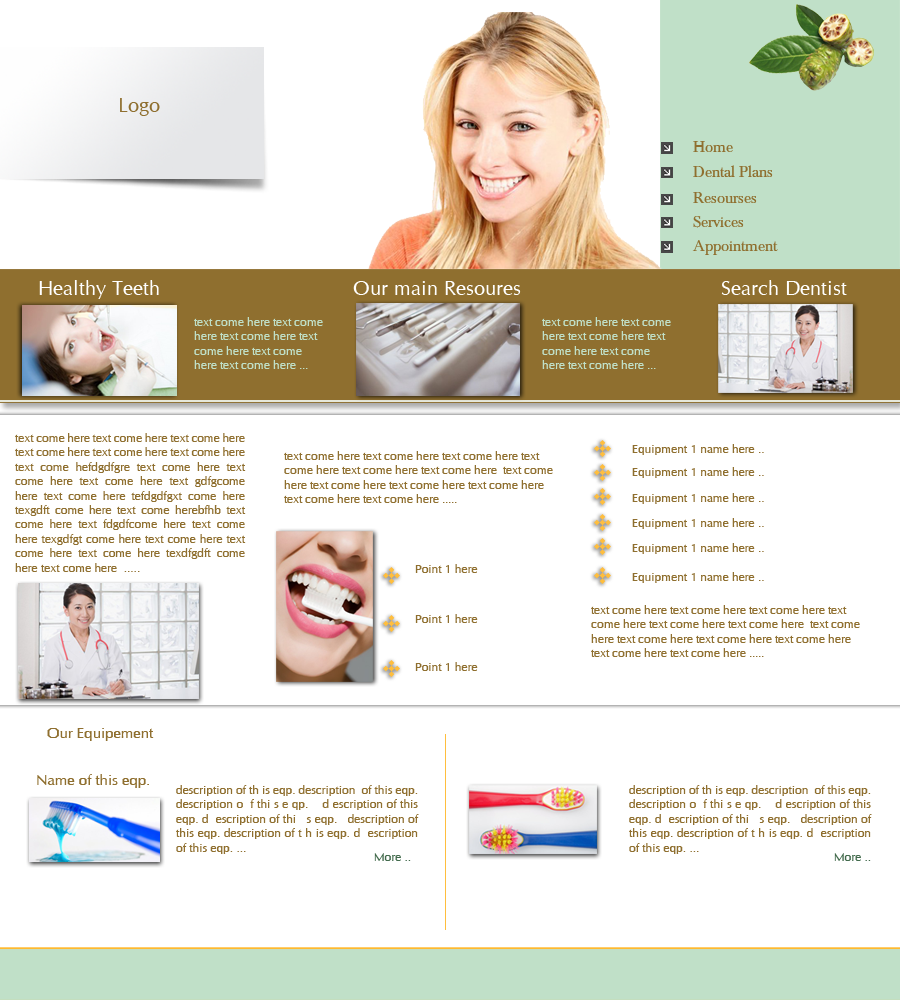
<style>
.page{position:relative;width:900px;height:1000px;background:#ffffff}
.page>*{position:absolute;margin:0}
.t1{font:20px "CGOmega";color:#8f6f2f}
.t2{font:16px "Baskerville";color:#8f6f2f}
.t3{font:20px "CGOmega";color:#ffffff}
.t4{font:12px "CGOmega";color:#c0e0c8}
.t5{font:12px "CGOmega";color:#8f6f2f}
.t6{font:15px "CGOmega";color:#8f6f2f}
.t7{font:12px "CGOmega";color:#436b4d}
</style>
<div class="page">
<p class="t1" style="left:120px;top:98px;width:40px;height:18px">Logo</p>
<p class="t2" style="left:693px;top:141px;width:40px;height:11px">Home</p>
<p class="t2" style="left:693px;top:165px;width:80px;height:12px">Dental Plans</p>
<p class="t2" style="left:693px;top:192px;width:64px;height:11px">Resourses</p>
<p class="t2" style="left:693px;top:216px;width:51px;height:12px">Services</p>
<p class="t2" style="left:692px;top:240px;width:86px;height:15px">Appointment</p>
<p class="t3" style="left:39px;top:280px;width:120px;height:19px">Healthy Teeth</p>
<p class="t3" style="left:353px;top:281px;width:168px;height:14px">Our main Resoures</p>
<p class="t3" style="left:721px;top:280px;width:126px;height:15px">Search Dentist</p>
<p class="t4" style="left:194px;top:317px;width:129px;height:52px">text come here text come here text come here text come here text come here text come here ...</p>
<p class="t4" style="left:542px;top:317px;width:129px;height:52px">text come here text come here text come here text come here text come here text come here ...</p>
<p class="t5" style="left:15px;top:433px;width:231px;height:139px;text-align:justify">text come here text come here text come here text come here text come here text come here  text come hefdgdfgre text come here text come here text come here text gdfgcome here text come here tefdgdfgxt come here texgdft come here text come herebfhb text come here text fdgdfcome here text come here texgdfgt come here text come here text come here text come here texdfgdft come here text come here  .....</p>
<p class="t5" style="left:632px;top:444px;width:132px;height:11px">Equipment 1 name here ..</p>
<p class="t5" style="left:284px;top:451px;width:269px;height:52px">text come here text come here text come here text come here text come here text come here  text come here text come here text come here text come here text come here text come here .....</p>
<p class="t5" style="left:632px;top:467px;width:132px;height:11px">Equipment 1 name here ..</p>
<p class="t5" style="left:632px;top:493px;width:132px;height:11px">Equipment 1 name here ..</p>
<p class="t5" style="left:632px;top:518px;width:132px;height:11px">Equipment 1 name here ..</p>
<p class="t5" style="left:632px;top:543px;width:132px;height:11px">Equipment 1 name here ..</p>
<p class="t5" style="left:415px;top:564px;width:63px;height:9px">Point 1 here</p>
<p class="t5" style="left:632px;top:572px;width:132px;height:11px">Equipment 1 name here ..</p>
<p class="t5" style="left:591px;top:605px;width:269px;height:52px">text come here text come here text come here text come here text come here text come here  text come here text come here text come here text come here text come here text come here .....</p>
<p class="t5" style="left:415px;top:614px;width:63px;height:9px">Point 1 here</p>
<p class="t5" style="left:415px;top:662px;width:63px;height:9px">Point 1 here</p>
<p class="t6" style="left:47px;top:728px;width:107px;height:13px">Our Equipement</p>
<p class="t6" style="left:37px;top:774px;width:112px;height:14px">Name of this eqp.</p>
<p class="t5" style="left:176px;top:785px;width:243px;height:69px;text-align:justify">description of th is eqp. description  of this eqp. description o  f thi s e qp.    d escription of this eqp. d  escription of thi   s eqp.   description of this eqp. description of t h is eqp. d  escription of this eqp. ...</p>
<p class="t5" style="left:629px;top:785px;width:243px;height:69px;text-align:justify">description of th is eqp. description  of this eqp. description o  f thi s e qp.    d escription of this eqp. d  escription of thi   s eqp.   description of this eqp. description of t h is eqp. d  escription of this eqp. ...</p>
<p class="t7" style="left:374px;top:853px;width:37px;height:8px">More ..</p>
<p class="t7" style="left:834px;top:853px;width:37px;height:8px">More ..</p>
</div>
